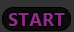
<style>
.page{position:relative;width:74px;height:32px;background:#333333}
.page>*{position:absolute;margin:0}
.t1{font:18.9px "MyanmarText-Bold";color:#8e2c86}
</style>
<div class="page">
<p class="t1" style="left:8px;top:13px;width:57px;height:13px">START</p>
</div>
